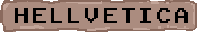
<style>
.page{position:relative;width:198px;height:32px;background:#ab8c7f}
.page>*{position:absolute;margin:0}
.t1{font:20px "RetroGaming";letter-spacing:0.16em;color:#000000}
</style>
<div class="page">
<p class="t1" style="left:15px;top:8px;width:173px;height:15px">HELLVETICA</p>
</div>
